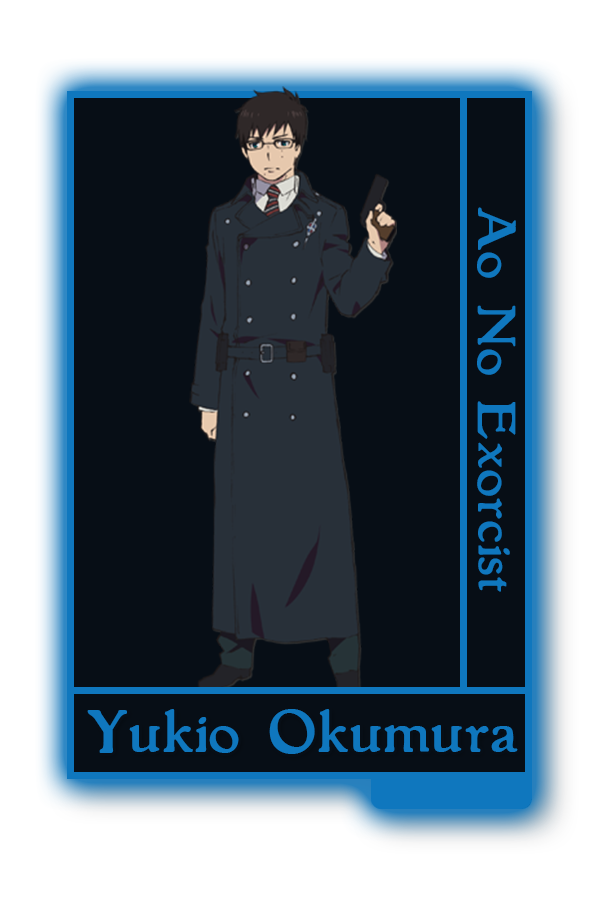
<style>
.page{position:relative;width:600px;height:900px;background:#070e16}
.page>*{position:absolute;margin:0}
.t1{font:48.8px "Grantham-Roman";color:#0f77be}
.t2{font:55.4px "Grantham-Roman";color:#0f77be}
</style>
<div class="page">
<p class="t1" style="left:477px;top:207px;width:39px;height:385px;rotate:90deg">Ao No Exorcist</p>
<p class="t2" style="left:87px;top:709px;width:431px;height:45px">Yukio Okumura</p>
</div>
